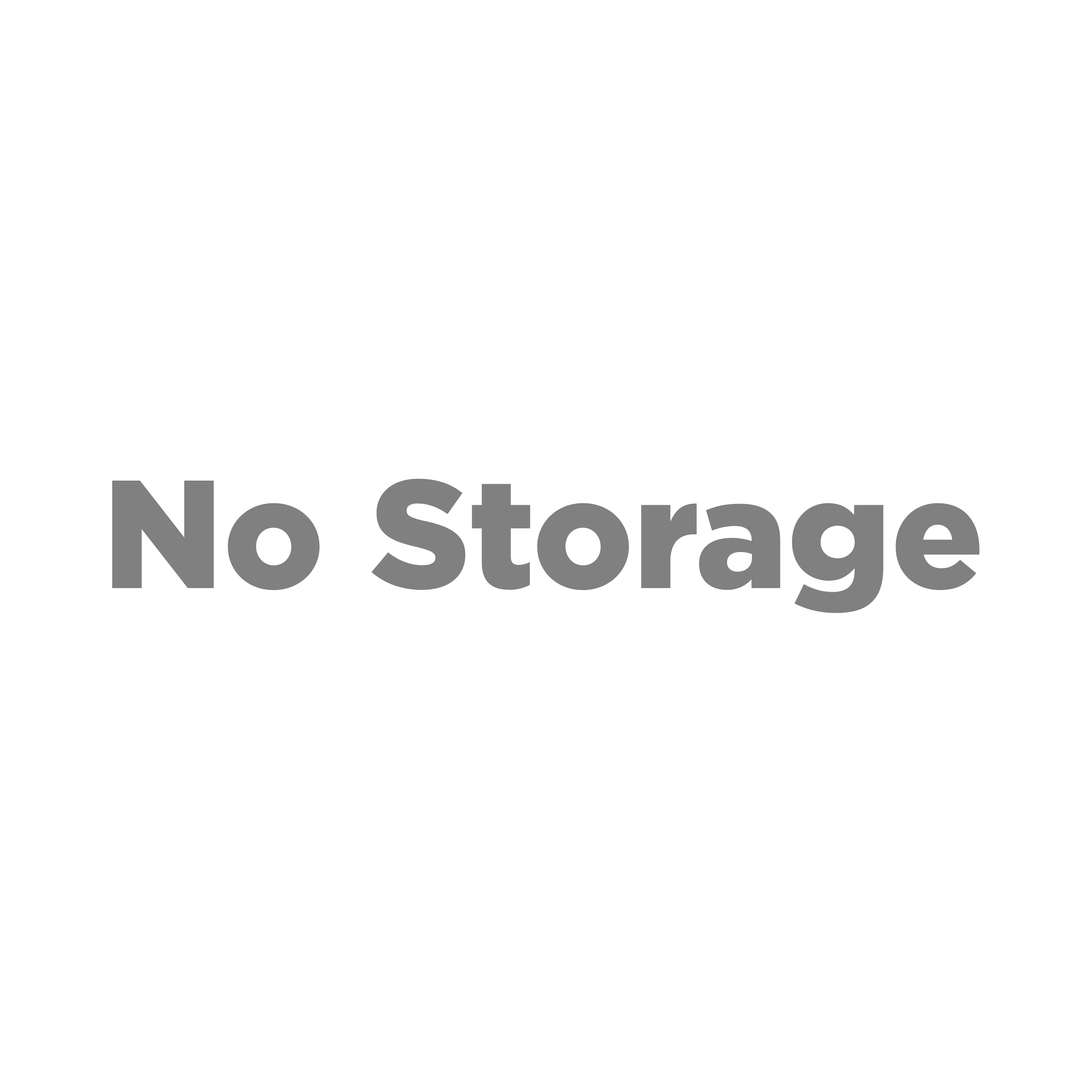
<style>
.page{position:relative;width:1092px;height:1092px;background:#ffffff}
.page>*{position:absolute;margin:0}
.t1{font:153.6px "Gotham-Black";color:#808080}
</style>
<div class="page">
<p class="t1" style="left:112px;top:479px;width:868px;height:134px">No Storage</p>
</div>
